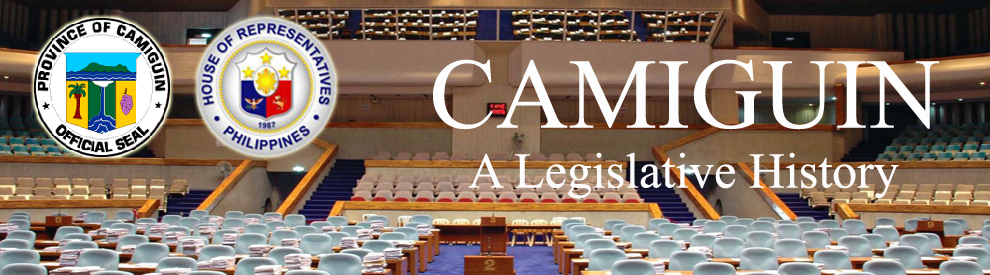
<style>
.page{position:relative;width:990px;height:275px}
.page>*{position:absolute;margin:0}
.t1{font:50px "TimesNewRomanPSMT";color:#fdfcfc}
.t2{font:100px "TimesNewRomanPSMT";color:#fdfdfd}
</style>
<div class="page">
<p class="t1" style="left:433px;top:59px;width:506px;height:140px;text-align:center"><span class="t2">CAMIGUIN<br></span>A Legislative History</p>
</div>
